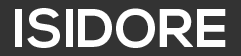
<style>
.page{position:relative;width:241px;height:56px;background:#333333}
.page>*{position:absolute;margin:0}
.t1{font:54px "NexaBold";color:#ffffff}
</style>
<div class="page">
<p class="t1" style="left:15px;top:8px;width:211px;height:40px">ISIDORE</p>
</div>
